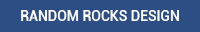
<style>
.page{position:relative;width:200px;height:32px;background:#2c4e85}
.page>*{position:absolute;margin:0}
.t1{font:14px "Roboto-Medium";color:#ffffff}
</style>
<div class="page">
<p class="t1" style="left:21px;top:10px;width:158px;height:11px">RANDOM ROCKS DESIGN</p>
</div>
